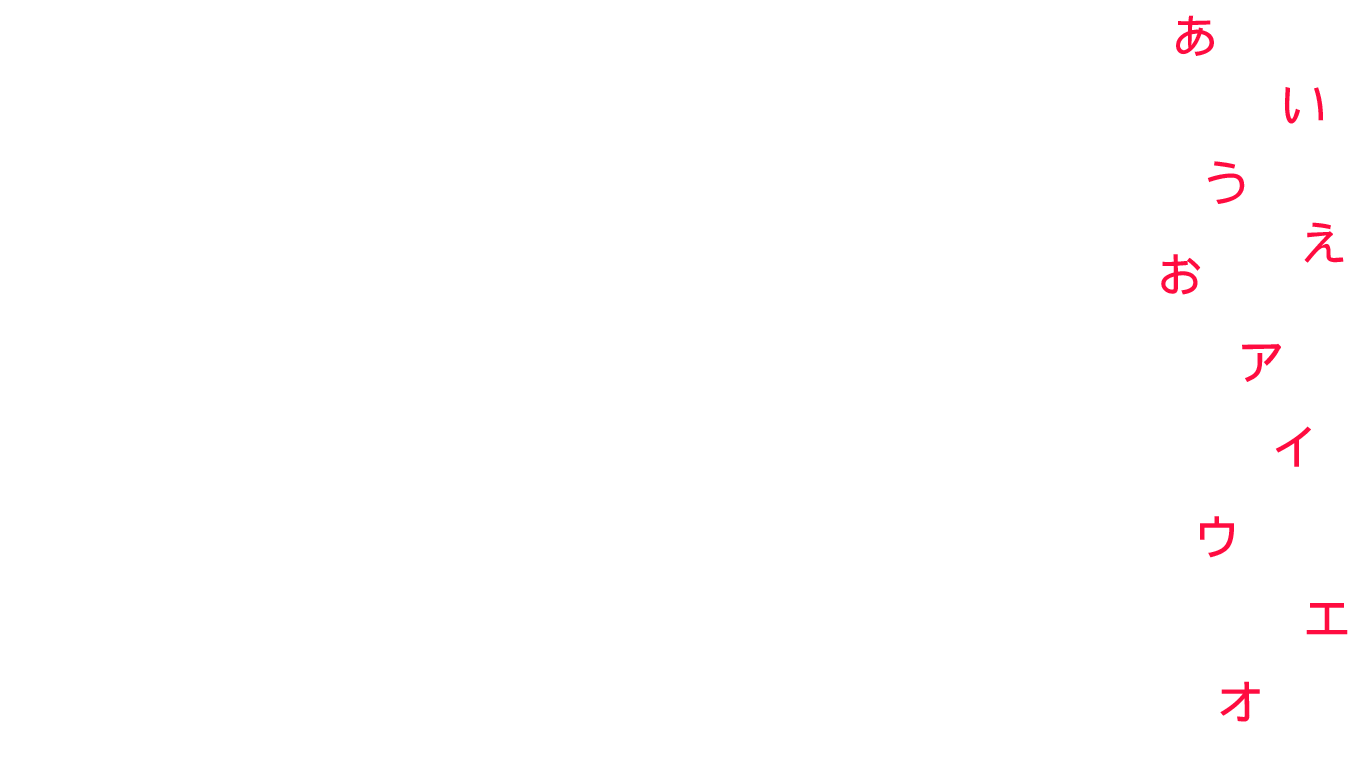
<style>
.page{position:relative;width:1360px;height:768px;background:#ffffff}
.page>*{position:absolute;margin:0}
.t1{font:48px "DroidSansFallback";color:#ff0c40}
</style>
<div class="page">
<p class="t1" style="left:1176px;top:15px;width:38px;height:41px">あ</p>
<p class="t1" style="left:1284px;top:87px;width:40px;height:37px">い</p>
<p class="t1" style="left:1207px;top:161px;width:38px;height:43px">う</p>
<p class="t1" style="left:1304px;top:222px;width:40px;height:41px">え</p>
<p class="t1" style="left:1161px;top:254px;width:40px;height:41px">お</p>
<p class="t1" style="left:1242px;top:343px;width:39px;height:39px">ア</p>
<p class="t1" style="left:1275px;top:426px;width:36px;height:41px">イ</p>
<p class="t1" style="left:1200px;top:516px;width:34px;height:42px">ウ</p>
<p class="t1" style="left:1306px;top:603px;width:42px;height:32px">エ</p>
<p class="t1" style="left:1220px;top:681px;width:40px;height:41px">オ</p>
</div>
